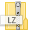
<style>
.page{position:relative;width:32px;height:32px;background:#ffffff}
.page>*{position:absolute;margin:0}
.t1{font:8px "SegoeUI"}
</style>
<div class="page">
<p class="t1" style="left:8px;top:17px;width:8px;height:7px">LZ</p>
</div>
